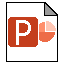
<style>
.page{position:relative;width:64px;height:64px;background:#ffffff}
.page>*{position:absolute;margin:0}
.t1{font:33.3px "MicrosoftYaHeiUI";color:#ffffff}
</style>
<div class="page">
<p class="t1" style="left:16px;top:20px;width:15px;height:25px">P</p>
</div>
